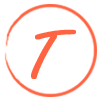
<style>
.page{position:relative;width:100px;height:100px;background:#ffffff}
.page>*{position:absolute;margin:0}
.t1{font:70px "FreestyleScript-Regular";color:#fe6441;font-weight:bold}
</style>
<div class="page">
<p class="t1" style="left:31px;top:29px;width:45px;height:50px">T</p>
</div>
